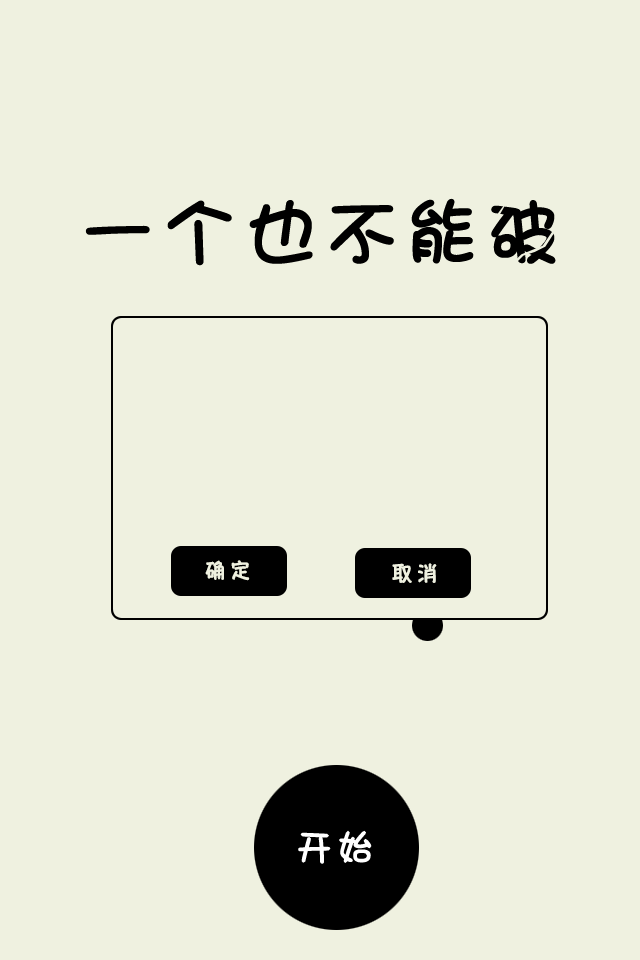
<style>
.page{position:relative;width:640px;height:960px;background:#eff1e0}
.page>*{position:absolute;margin:0}
.t1{font:20px "HannotateSC-W7";letter-spacing:0.24em;color:#eff1e0;font-weight:bold}
.t2{font:36px "DFShaoNvW5";letter-spacing:0.24em;color:#ffffff;font-weight:bold}
</style>
<div class="page">
<p class="t1" style="left:205px;top:560px;width:45px;height:21px">确定</p>
<p class="t1" style="left:392px;top:563px;width:45px;height:20px">取消</p>
<p class="t2" style="left:298px;top:830px;width:74px;height:34px">开始</p>
</div>
